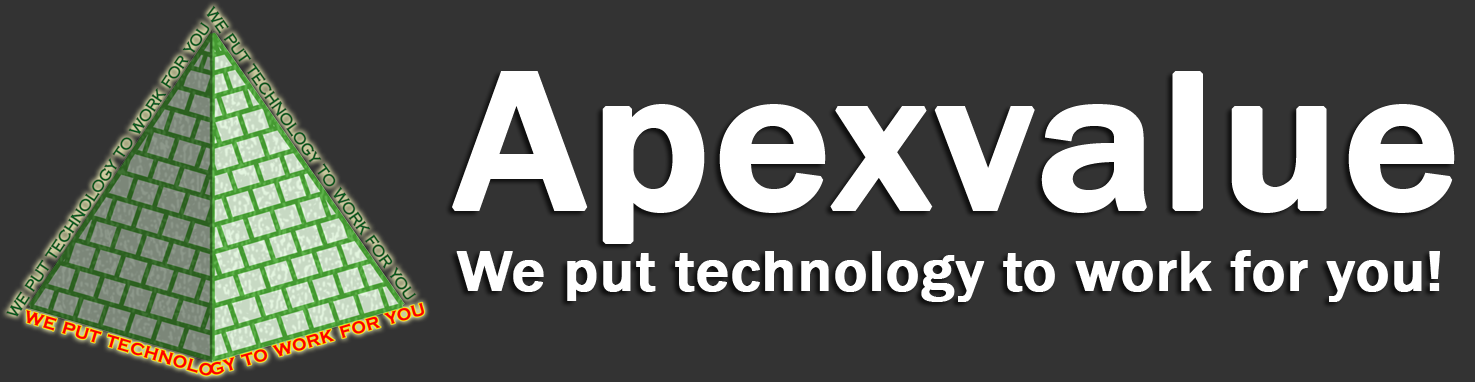
<style>
.page{position:relative;width:1475px;height:382px;background:#333333}
.page>*{position:absolute;margin:0}
.t1{font:201.5px "FranklinGothic-Medium";color:#ffffff;font-weight:bold;scale:1.09 1}
.t2{font:58px "FranklinGothic-Medium";color:#ffffff;font-weight:bold;scale:1.09 1}
</style>
<div class="page">
<p class="t1" style="left:452px;top:71px;width:1003px;height:173px">Apexvalue</p>
<p class="t2" style="left:456px;top:250px;width:984px;height:52px">We put technology to work for you!</p>
</div>
